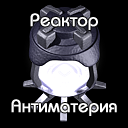
<style>
.page{position:relative;width:128px;height:128px;background:#000000}
.page>*{position:absolute;margin:0}
.t1{font:18px "BauhausC-Medium";color:#ffffff;font-weight:bold}
</style>
<div class="page">
<p class="t1" style="left:30px;top:13px;width:68px;height:17px">Реактор</p>
<p class="t1" style="left:11px;top:99px;width:106px;height:17px">Антиматерия</p>
</div>
